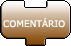
<style>
.page{position:relative;width:71px;height:46px}
.page>*{position:absolute;margin:0}
.t1{font:9px "Verdana";color:#ffffff}
</style>
<div class="page">
<p class="t1" style="left:3px;top:18px;width:62px;height:10px">COMENTÁRIO</p>
</div>
